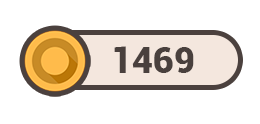
<style>
.page{position:relative;width:260px;height:124px;background:#ffffff}
.page>*{position:absolute;margin:0}
.t1{font:35.9px "Roboto-Black";color:#49403d}
</style>
<div class="page">
<p class="t1" style="left:114px;top:46px;width:80px;height:27px">1469</p>
</div>
